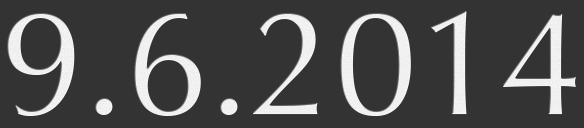
<style>
.page{position:relative;width:584px;height:128px;background:#333333}
.page>*{position:absolute;margin:0}
.t1{font:150px "Optima-Regular";color:#ffffff}
</style>
<div class="page">
<p class="t1" style="left:7px;top:11px;width:569px;height:105px">9.6.2014</p>
</div>
